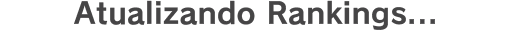
<style>
.page{position:relative;width:512px;height:30px;background:#ffffff}
.page>*{position:absolute;margin:0}
.t1{font:29.3px "RodinPro-B";letter-spacing:0.012em;color:#464546}
</style>
<div class="page">
<p class="t1" style="left:74px;top:0px;width:361px;height:30px">Atualizando Rankings...</p>
</div>
